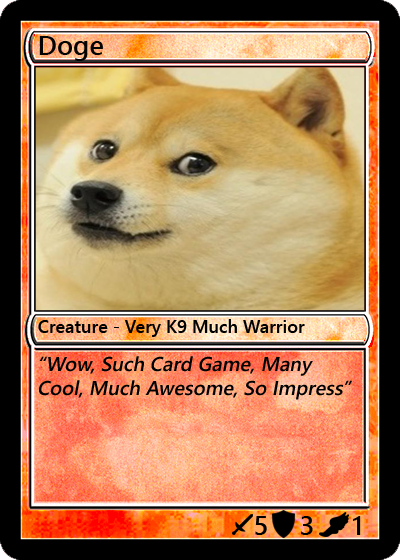
<style>
.page{position:relative;width:400px;height:560px}
.page>*{position:absolute;margin:0}
.t1{font:27px "YuGothicUI-Semibold";color:#040404}
.t2{font:18px "YuGothicUI-Semibold";color:#000000}
.t3{font:20px "YuGothicUI-Semibold";color:#000000;font-style:italic}
.t4{font:27px "YuGothicUI-Semibold";color:#000000}
</style>
<div class="page">
<p class="t1" style="left:39px;top:36px;width:64px;height:25px">Doge</p>
<p class="t2" style="left:38px;top:319px;width:267px;height:18px">Creature - Very K9 Much Warrior</p>
<p class="t3" style="left:39px;top:356px;width:313px;height:44px">“Wow, Such Card Game, Many Cool, Much Awesome, So Impress”</p>
<p class="t4" style="left:255px;top:516px;width:12px;height:19px">5</p>
<p class="t4" style="left:301px;top:516px;width:12px;height:19px">3</p>
<p class="t4" style="left:353px;top:516px;width:8px;height:19px">1</p>
</div>
